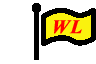
<style>
.page{position:relative;width:96px;height:64px;background:#ffffff}
.page>*{position:absolute;margin:0}
.t1{font:19.5px "TimesNewRomanPS-BoldItalicMT";letter-spacing:0.05em;color:#ff0000;font-weight:bold}
</style>
<div class="page">
<p class="t1" style="left:54px;top:20px;width:28px;height:14px">WL</p>
</div>
